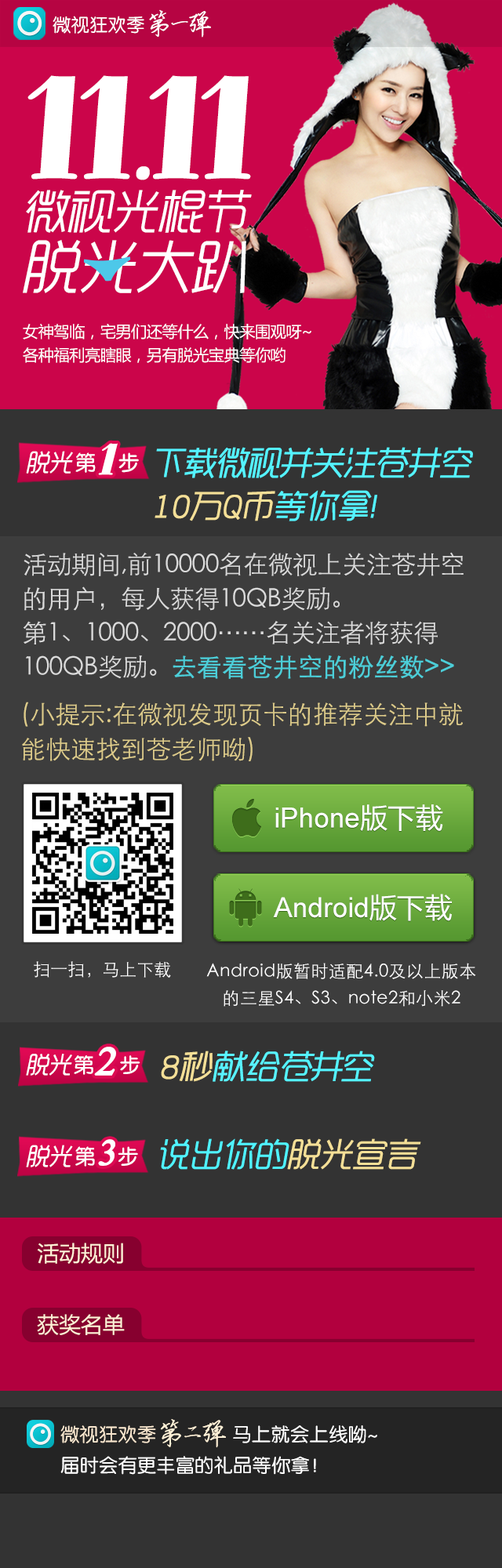
<style>
.page{position:relative;width:502px;height:1568px}
.page>*{position:absolute;margin:0}
.t1{font:18.2px "FZY3JW--GB1-0";letter-spacing:0.02em;color:#ffffff}
.t2{font:27.4px "FZYBXSJW--GB1-0";letter-spacing:-0.08em;color:#ffffff}
.t3{font:20.3px "FZYBXSJW--GB1-0";letter-spacing:-0.06em;color:#ffffff}
.t4{font:165.8px "AllegroBT-Regular";letter-spacing:-0.02em;color:#ffffff}
.t5{font:64.9px "AllegroBT-Regular";letter-spacing:-0.02em;color:#ffffff;scale:1.27 1}
.t6{font:46.5px/59.5px "RTWSYueGoTrial-Regular";letter-spacing:-0.02em;color:#ffffff;font-style:italic}
.t7{font:58px/59.5px "RTWSYueGoTrial-Regular";letter-spacing:-0.02em;color:#ffffff;font-style:italic}
.t8{font:15.8px/23.5px "MicrosoftYaHei";letter-spacing:-0.02em;color:#ffffff}
.t9{font:50px "AllegroBT-Regular";letter-spacing:-0.02em;color:#ffffff;font-style:italic}
.t10{font:32.9px/43.1px "RTWSYueGoTrial-Regular";letter-spacing:-0.06em;color:#54f3ff;font-weight:bold;font-style:italic}
.t11{font:32.9px/43.1px "RTWSYueGoTrial-Regular";letter-spacing:-0.06em;color:#f4df97;font-weight:bold;font-style:italic}
.t12{font:23.9px "RTWSYueGoTrial-Regular";letter-spacing:-0.02em;color:#ffffff;font-style:italic}
.t13{font:20.9px "FZY3JW--GB1-0";letter-spacing:-0.02em;color:#ffffff}
.t14{font:25.1px/34.2px "STXihei";letter-spacing:-0.02em;color:#dadada}
.t15{font:25.1px/34.2px "STXihei";letter-spacing:-0.02em;color:#4cced8;font-weight:bold}
.t16{font:25.1px/34.9px "STXihei";color:#ddcb8a}
.t17{font:27.9px "ArialMT";color:#ffffff}
.t18{font:27.9px "MicrosoftYaHei";color:#ffffff}
.t19{font:17.2px "STXihei";color:#ffffff}
.t20{font:17.2px/27px "STXihei";letter-spacing:0.02em;color:#ffffff}
.t21{font:50px "Aparajita";letter-spacing:-0.02em;color:#ffffff;font-weight:bold;font-style:italic}
.t22{font:23.3px "RTWSYueGoTrial-Regular";letter-spacing:-0.02em;color:#ffffff;font-style:italic}
.t23{font:20.4px "FZY3JW--GB1-0";letter-spacing:-0.02em;color:#ffffff}
.t24{font:32.9px "RTWSYueGoTrial-Regular";letter-spacing:-0.1em;color:#54f3ff;font-weight:bold;font-style:italic}
.t25{font:32.9px "RTWSYueGoTrial-Regular";letter-spacing:-0.02em;color:#f4df97;font-weight:bold;font-style:italic}
.t26{font:32.9px "RTWSYueGoTrial-Regular";letter-spacing:-0.02em;color:#58f3ff;font-weight:bold;font-style:italic}
.t27{font:23.7px "RTWSYueGoTrial-Regular";letter-spacing:-0.02em;color:#ffffff;font-style:italic}
.t28{font:45.1px "Aparajita";letter-spacing:-0.02em;color:#ffffff;font-weight:bold;font-style:italic}
.t29{font:32.9px "RTWSYueGoTrial-Regular";letter-spacing:-0.04em;color:#4ff3ff;font-weight:bold;font-style:italic}
.t30{font:32.9px "RTWSYueGoTrial-Regular";letter-spacing:-0.04em;color:#f4df97;font-weight:bold;font-style:italic}
.t31{font:20.8px "FZY3JW--GB1-0";letter-spacing:-0.02em;color:#ffffff}
.t32{font:21.6px "MicrosoftYaHei";color:#fef0d6}
.t33{font:28.8px "FZYBXSJW--GB1-0";letter-spacing:-0.08em;color:#fef0d6}
.t34{font:18.8px/31px "FZY3JW--GB1-0";letter-spacing:0.02em;color:#ffffff}
.t35{font:18.8px/31px "FZY3JW--GB1-0";letter-spacing:0.02em;color:#f8e6ce}
.t36{font:21.4px "FZYBXSJW--GB1-0";letter-spacing:-0.06em;color:#fef0d6}
</style>
<div class="page">
<p class="t1" style="left:53px;top:16px;width:91px;height:18px">微视狂欢季</p>
<p class="t2" style="left:149px;top:9px;width:62px;height:29px">第    弹</p>
<p class="t3" style="left:171px;top:21px;width:17px;height:4px">一</p>
<p class="t4" style="left:27px;top:75px;width:51px;height:105px">1</p>
<p class="t4" style="left:80px;top:75px;width:50px;height:105px">1</p>
<p class="t4" style="left:149px;top:75px;width:50px;height:105px">1</p>
<p class="t4" style="left:201px;top:75px;width:50px;height:105px">1</p>
<p class="t5" style="left:136px;top:166px;width:14px;height:14px">.</p>
<p class="t6" style="left:23px;top:190px;width:229px;height:103px">微视光棍节<br><span class="t7">脱光大趴</span></p>
<p class="t8" style="left:23px;top:324px;width:288px;height:39px">女神驾临，宅男们还等什么，快来围观呀~ <br>各种福利亮瞎眼，另有脱光宝典等你哟</p>
<p class="t9" style="left:98px;top:443px;width:20px;height:32px">1</p>
<p class="t10" style="left:154px;top:447px;width:319px;height:74px">下载微视并关注苍井空<br><span class="t11">10万Q币</span>等你拿!</p>
<p class="t12" style="left:26px;top:451px;width:47px;height:23px">脱光</p>
<p class="t13" style="left:75px;top:452px;width:64px;height:21px">第   步</p>
<p class="t14" style="left:23px;top:552px;width:440px;height:127px">活动期间,前10000名在微视上关注苍井空的用户，每人获得10QB奖励。<br>第1、1000、2000……名关注者将获得100QB奖励。<span class="t15">去看看苍井空的粉丝数&gt;&gt;</span></p>
<p class="t16" style="left:22px;top:702px;width:441px;height:59px">(小提示:在微视发现页卡的推荐关注中就<br>能快速找到苍老师呦)</p>
<p class="t17" style="left:275px;top:804px;width:168px;height:27px">iPhone<span class="t18">版下载</span></p>
<p class="t17" style="left:273px;top:894px;width:179px;height:27px">Android<span class="t18">版下载</span></p>
<p class="t19" style="left:34px;top:961px;width:137px;height:17px">扫一扫，马上下载</p>
<p class="t20" style="left:206px;top:963px;width:270px;height:44px;text-align:center">Android版暂时适配4.0及以上版本<br>的三星S4、S3、note2和小米2</p>
<p class="t21" style="left:94px;top:1047px;width:22px;height:29px">2</p>
<p class="t22" style="left:26px;top:1054px;width:46px;height:22px">脱光</p>
<p class="t23" style="left:74px;top:1055px;width:66px;height:20px">第    步</p>
<p class="t24" style="left:161px;top:1051px;width:214px;height:31px"><span class="t25">8秒</span><span class="t26">献给</span>苍井空</p>
<p class="t27" style="left:26px;top:1145px;width:47px;height:22px">脱光</p>
<p class="t28" style="left:98px;top:1139px;width:17px;height:27px">3</p>
<p class="t29" style="left:160px;top:1138px;width:261px;height:32px">说出你的<span class="t30">脱光宣言</span></p>
<p class="t31" style="left:75px;top:1146px;width:63px;height:21px">第   步</p>
<p class="t32" style="left:37px;top:1243px;width:86px;height:21px">活动规则</p>
<p class="t32" style="left:37px;top:1314px;width:88px;height:21px">获奖名单</p>
<p class="t33" style="left:160px;top:1419px;width:66px;height:29px">第    弹</p>
<p class="t34" style="left:60px;top:1425px;width:317px;height:50px"><span class="t35">微视狂欢季 </span>              马上就会上线呦~<br>届时会有更丰富的礼品等你拿！</p>
<p class="t36" style="left:184px;top:1426px;width:17px;height:12px">二</p>
</div>
